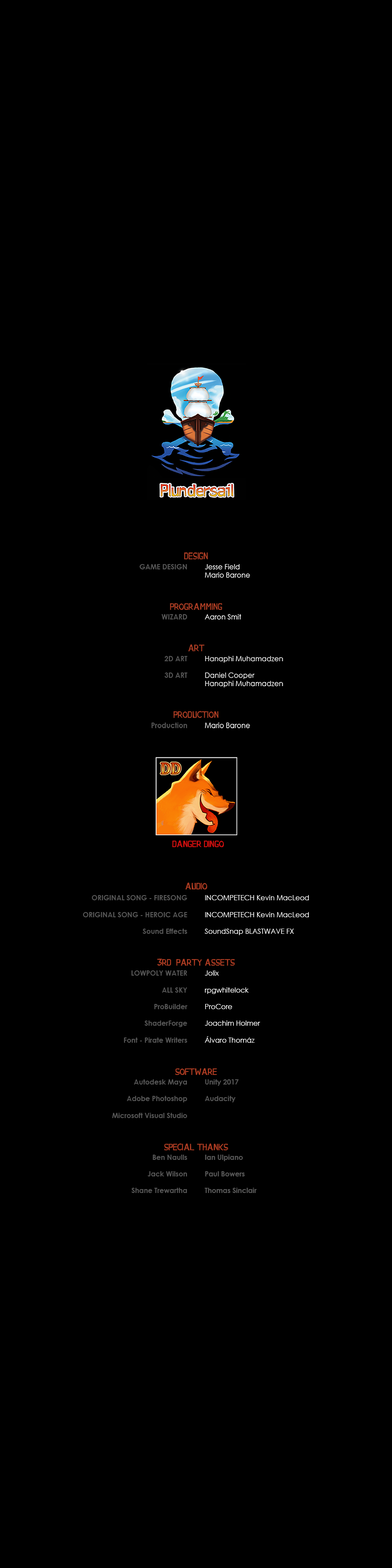
<style>
.page{position:relative;width:392px;height:1568px;background:#000000}
.page>*{position:absolute;margin:0}
.t1{font:7px "CenturyGothic-Bold";color:#585858}
.t2{font:7px "CenturyGothic";color:#ffffff}
.t3{font:7px "CenturyGothic-Bold";color:#565656}
.t4{font:10.5px "PiratesWriters";color:#d21010}
.t5{font:10.5px "PiratesWriters";color:#ad3d23}
</style>
<div class="page">
<p class="t1" style="left:83px;top:695px;width:105px;height:498px;text-align:right">GAME DESIGN<br><br><br><br><br><br>WIZARD<br><br><br><br><br>2D ART<br><br>3D ART<br><br><br><br><br><br>Production<br><br><br><br><br>ORIGINAL SONG - FIRESONG<br> <br>ORIGINAL SONG - HEROIC AGE<br><br>Sound Effects<br><br><br><br><br>LOWPOLY WATER <br><br>ALL SKY<br><br>ProBuilder<br><br>ShaderForge<br><br>Font - Pirate Writers <br><br><br><br><br>Autodesk Maya<br><br>Adobe Photoshop<br><br>Microsoft Visual Studio<br><br><br><br><br>Ben Naulls<br><br>Jack Wilson<br><br>Shane Trewartha</p>
<p class="t2" style="left:205px;top:695px;width:104px;height:498px">Jesse Field<br>Mario Barone<br><br><br><br><br>Aaron Smit<br><br><br><br><br>Hanaphi Muhamadzen<br><br>Daniel Cooper<br>Hanaphi Muhamadzen<br><br><br><br><br>Mario Barone<br><br><br><br><br>INCOMPETECH Kevin MacLeod<br><br>INCOMPETECH Kevin MacLeod<br><br>SoundSnap BLASTWAVE FX<br><br><br><br><br>Jolix<br><br>rpgwhitelock<br><br>ProCore<br><br>Joachim Holmer<br><br>Álvaro Thomáz<br><br><br><br><br><span class="t3">Unity 2017<br><br>Audacity<br><br><br><br><br><br><br></span><span class="t1">Ian Ulpiano<br><br>Paul Bowers<br><br>Thomas Sinclair</span></p>
<p class="t4" style="left:172px;top:840px;width:52px;height:7px">DANGER DINGO</p>
<p class="t5" style="left:185px;top:882px;width:22px;height:7px">AUDIO</p>
<p class="t5" style="left:157px;top:959px;width:78px;height:7px">3RD  PARTY ASSETS</p>
<p class="t5" style="left:175px;top:1068px;width:42px;height:7px">SOFTWARE</p>
<p class="t5" style="left:164px;top:1143px;width:64px;height:8px">SPECIAL THANKS</p>
</div>
